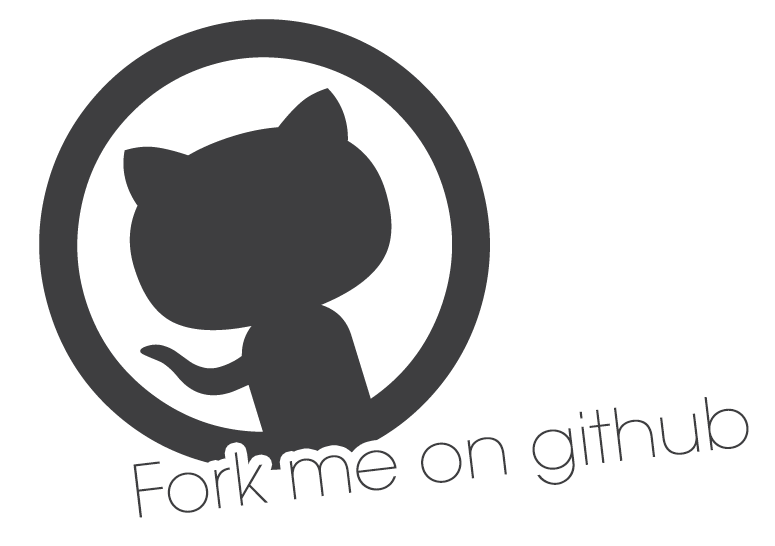
<style>
.page{position:relative;width:775px;height:546px;background:#ffffff}
.page>*{position:absolute;margin:0}
.t1{font:72px "ITCAvantGardeStd-XLt";color:#3e3e40}
</style>
<div class="page">
<p class="t1" style="left:133px;top:397px;width:616px;height:121px;rotate:-7deg">Fork me on github</p>
</div>
